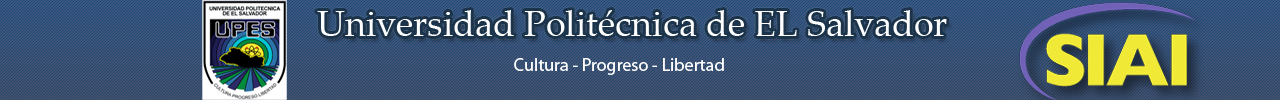
<style>
.page{position:relative;width:1280px;height:100px}
.page>*{position:absolute;margin:0}
.t1{font:36px "PalatinoLinotype-Roman";color:#fefefe}
.t2{font:18px "MyriadPro-Regular";color:#fefefe}
</style>
<div class="page">
<p class="t1" style="left:317px;top:10px;width:630px;height:26px">Universidad Politécnica de EL Salvador</p>
<p class="t2" style="left:514px;top:58px;width:210px;height:17px">Cultura - Progreso - Libertad</p>
</div>
